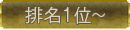
<style>
.page{position:relative;width:130px;height:30px}
.page>*{position:absolute;margin:0}
.t1{font:18px "GothicMB101Pr6N-Light";color:#ded0c1}
</style>
<div class="page">
<p class="t1" style="left:25px;top:6px;width:80px;height:18px">排名1位~</p>
</div>
